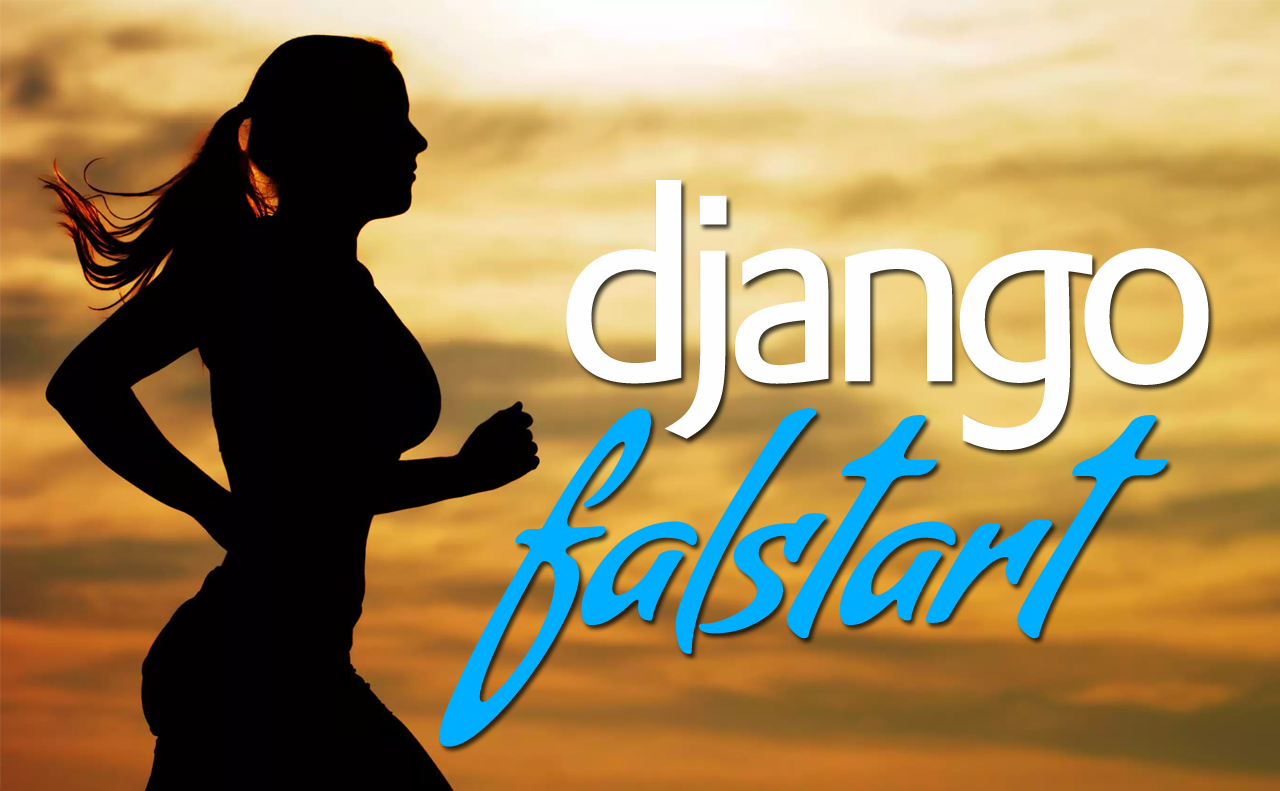
<style>
.page{position:relative;width:1280px;height:791px}
.page>*{position:absolute;margin:0}
.t1{font:268.3px "DTLProkyonT";letter-spacing:-0.1em;color:#fefefe}
.t2{font:242.4px "Condiment-Regular";letter-spacing:-0.1em;color:#00aeff}
</style>
<div class="page">
<p class="t1" style="left:566px;top:180px;width:643px;height:271px">django</p>
<p class="t2" style="left:439px;top:408px;width:729px;height:339px">f a l s t a r t</p>
</div>
